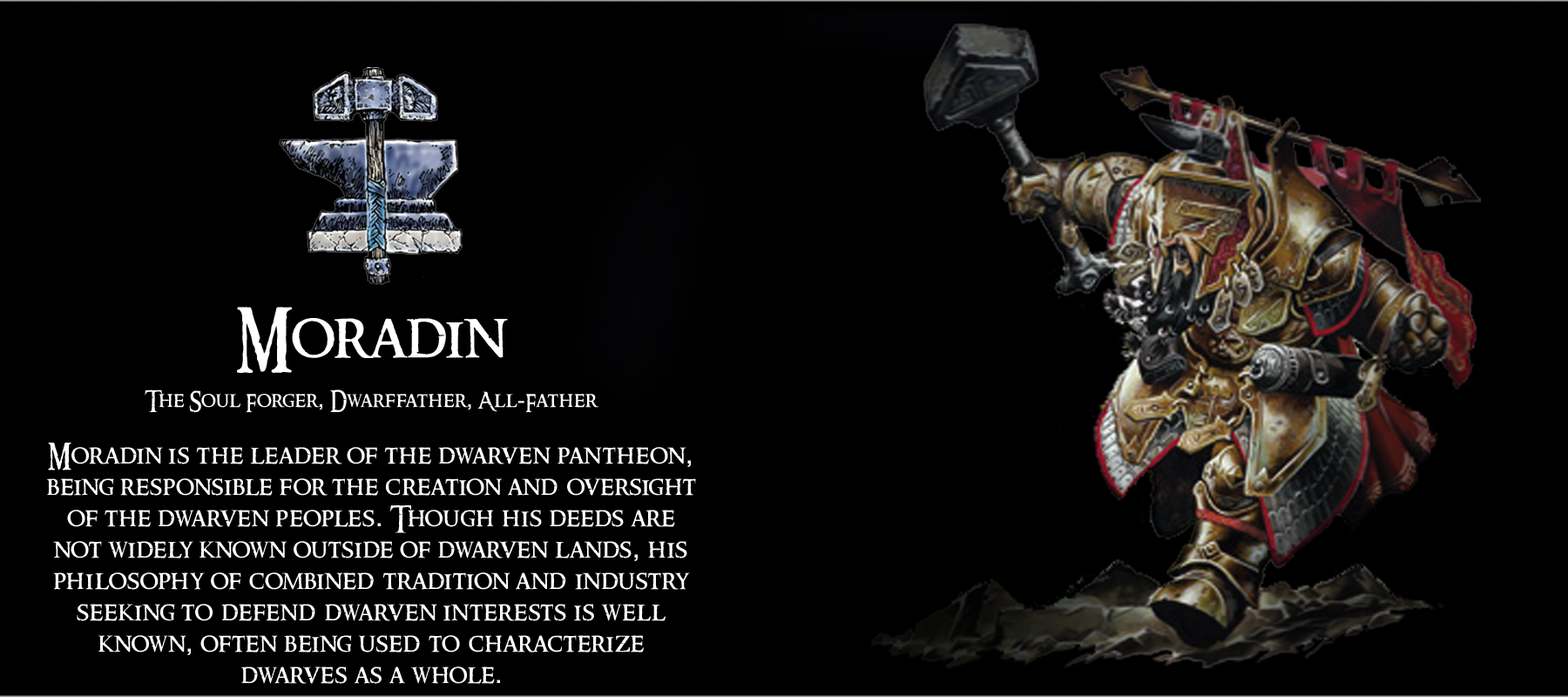
<style>
.page{position:relative;width:1568px;height:697px;background:#000000}
.page>*{position:absolute;margin:0}
.t1{font:26.1px "RingbearerMedium";letter-spacing:0.025em;color:#ffffff}
.t2{font:62.7px "RingbearerMedium";letter-spacing:0.025em;color:#ffffff}
.t3{font:20.9px "RingbearerMedium";letter-spacing:0.025em;color:#ffffff}
.t4{font:20.9px "Rockwell";letter-spacing:0.025em;color:#ffffff}
.t5{font:26.1px "Rockwell";letter-spacing:0.025em;color:#ffffff}
</style>
<div class="page">
<p class="t1" style="left:47px;top:307px;width:649px;height:377px;text-align:center"><span class="t2">Moradin<br></span><span class="t3"><br>The Soul Forger</span><span class="t4">,</span><span class="t3"> Dwarffather</span><span class="t4">,</span><span class="t3"> All</span><span class="t4">-</span><span class="t3">Father<br><br></span>Moradin is the leader of the dwarven pantheon<span class="t5">,</span> <br>being responsible for the creation and oversight <br>of the dwarven peoples<span class="t5">.</span> Though his deeds are <br>not widely known outside of dwarven lands<span class="t5">,</span> his <br>philosophy of combined tradition and industry <br>seeking to defend dwarven interests is well <br>known<span class="t5">,</span> often being used to characterize <br>dwarves as a whole<span class="t5">.</span></p>
</div>
